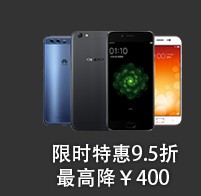
<style>
.page{position:relative;width:201px;height:196px;background:#333333}
.page>*{position:absolute;margin:0}
.t1{font:20px/24px "AdobeHeitiStd-Regular";color:#ffffff}
</style>
<div class="page">
<p class="t1" style="left:53px;top:143px;width:125px;height:44px">限时特惠9.5折<br>       最高降￥400</p>
</div>
